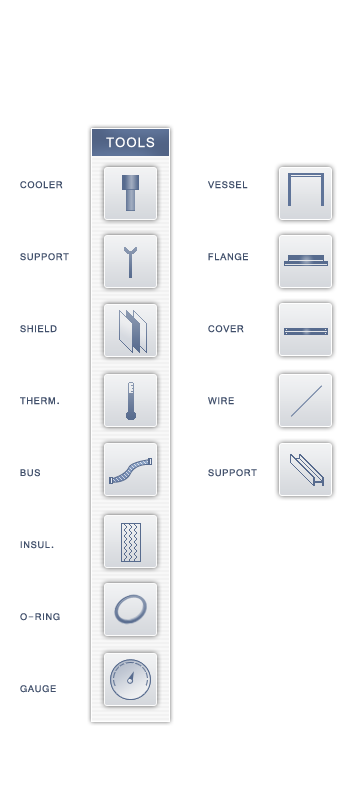
<style>
.page{position:relative;width:350px;height:800px;background:#ffffff}
.page>*{position:absolute;margin:0}
.t1{font:20px "Vrinda";letter-spacing:0.05em;color:#ffffff;text-transform:uppercase}
.t2{font:14px/24px "Vrinda";letter-spacing:0.05em;color:#41506b;text-transform:uppercase}
</style>
<div class="page">
<p class="t1" style="left:106px;top:137px;width:49px;height:11px">tools</p>
<p class="t2" style="left:20px;top:181px;width:49px;height:512px">cooler<br><br><br>support<br><br><br>shield<br><br><br>therm.<br><br><br>bus<br><br><br>insul.<br><br><br>o-ring<br><br><br>gauge</p>
<p class="t2" style="left:208px;top:181px;width:49px;height:296px">vessel<br><br><br>flange<br><br><br>cover<br><br><br>wire<br><br><br>support</p>
</div>
